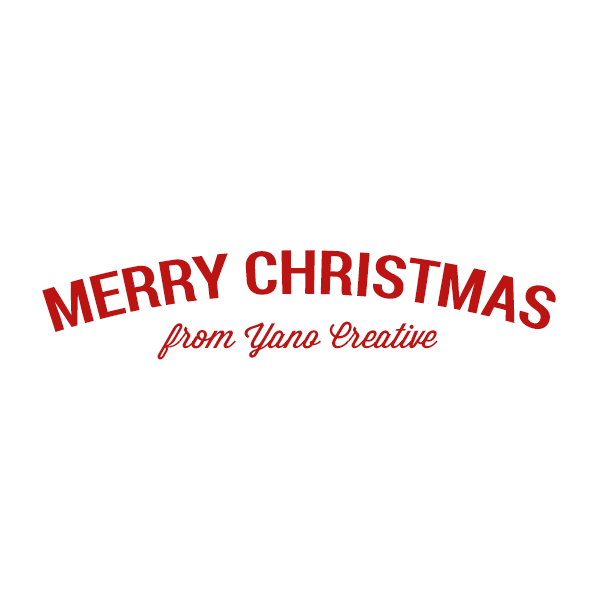
<style>
.page{position:relative;width:600px;height:600px;background:#ffffff}
.page>*{position:absolute;margin:0}
.t1{font:61.3px "RobotoCondensed-Bold";color:#bc1313;text-transform:uppercase}
.t2{font:34.5px "Wisdom-Script";color:#bc1313}
</style>
<div class="page">
<p class="t1" style="left:42px;top:250px;width:514px;height:82px">Merry Christmas</p>
<p class="t2" style="left:157px;top:321px;width:281px;height:39px">from Yano Creative</p>
</div>
